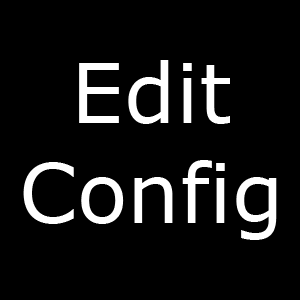
<style>
.page{position:relative;width:300px;height:300px;background:#000000}
.page>*{position:absolute;margin:0}
.t1{font:83.3px "Verdana";color:#ffffff}
</style>
<div class="page">
<p class="t1" style="left:23px;top:60px;width:254px;height:180px;text-align:center">Edit<br>Config</p>
</div>
